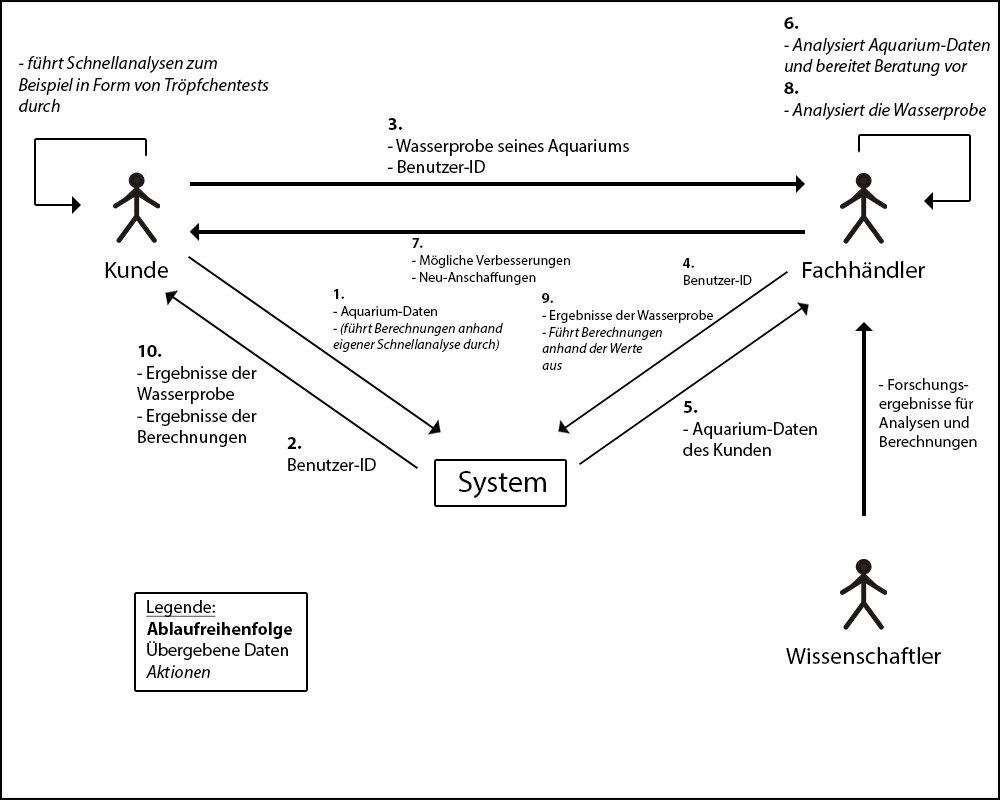
<style>
.page{position:relative;width:1000px;height:800px;background:#ffffff}
.page>*{position:absolute;margin:0}
.t1{font:18px "MyriadPro-It";color:#000000}
.t2{font:18px "MyriadPro-Bold";color:#000000}
.t3{font:18px "MyriadPro-Regular";color:#000000}
.t4{font:14px "MyriadPro-Regular";color:#000000}
.t5{font:14px "MyriadPro-Bold";color:#000000}
.t6{font:23.8px "MyriadPro-Regular";color:#000000}
.t7{font:23.9px "MyriadPro-Regular";color:#000000}
.t8{font:14px "MyriadPro-It";color:#000000}
.t9{font:16px "MyriadPro-Regular";color:#000000}
.t10{font:30px "MyriadPro-Regular";color:#000000}
.t11{font:18px "MyriadPro-Regular";color:#000000;text-decoration:underline}
</style>
<div class="page">
<p class="t1" style="left:784px;top:17px;width:206px;height:103px"><span class="t2">6.<br></span>- Analysiert Aquarium-Daten<br>und bereitet Beratung vor<br><span class="t2">8.<br></span>- Analysiert die Wasserprobe</p>
<p class="t1" style="left:18px;top:56px;width:251px;height:56px">- führt Schnellanalysen zum<br>Beispiel in Form von Tröpfchentests<br>durch</p>
<p class="t3" style="left:388px;top:118px;width:241px;height:55px"><span class="t2">3.<br></span>- Wasserprobe seines Aquariums<br>- Benutzer-ID</p>
<p class="t4" style="left:412px;top:238px;width:158px;height:47px"><span class="t5">7.<br></span>- Mögliche Verbesserungen<br>- Neu-Anschaffungen</p>
<p class="t6" style="left:105px;top:261px;width:63px;height:17px">Kunde</p>
<p class="t4" style="left:683px;top:258px;width:69px;height:27px"><span class="t5">4.<br></span>Benutzer-ID</p>
<p class="t7" style="left:803px;top:261px;width:122px;height:17px">Fachhändler</p>
<p class="t8" style="left:333px;top:289px;width:170px;height:63px"><span class="t5">1.<br></span><span class="t4">- Aquarium-Daten<br></span>- (führt Berechnungen anhand <br>eigener Schnellanalyse durch)</p>
<p class="t8" style="left:542px;top:293px;width:171px;height:77px"><span class="t5">9.<br></span><span class="t4">- Ergebnisse der Wasserprobe<br></span>- Führt Berechnungen<br>anhand der Werte<br>aus</p>
<p class="t3" style="left:137px;top:345px;width:120px;height:102px"><span class="t2">10.<br></span>- Ergebnisse der<br>Wasserprobe<br>- Ergebnisse der<br>Berechnungen</p>
<p class="t9" style="left:879px;top:378px;width:98px;height:72px">- Forschungs-<br>ergebnisse für <br>Analysen und <br>Berechnungen</p>
<p class="t3" style="left:683px;top:401px;width:134px;height:55px"><span class="t2">5.<br></span>- Aquarium-Daten<br>des Kunden</p>
<p class="t3" style="left:287px;top:437px;width:89px;height:34px"><span class="t2">2. <br></span>Benutzer-ID</p>
<p class="t10" style="left:458px;top:471px;width:88px;height:28px">System</p>
<p class="t2" style="left:146px;top:600px;width:146px;height:78px"><span class="t11">Legende:<br></span>Ablaufreihenfolge<br><span class="t3">Übergebene Daten<br></span><span class="t1">Aktionen</span></p>
<p class="t7" style="left:786px;top:647px;width:155px;height:17px">Wissenschaftler</p>
</div>
